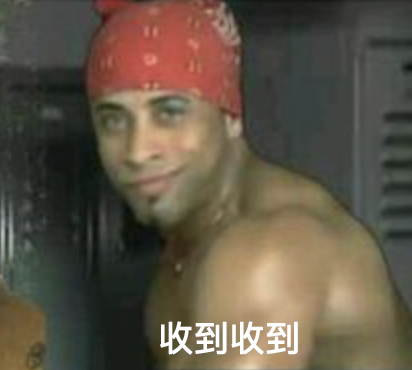
<style>
.page{position:relative;width:412px;height:370px}
.page>*{position:absolute;margin:0}
.t1{font:34.7px "PingFangSC-Regular";color:#ffffff;font-weight:bold}
</style>
<div class="page">
<p class="t1" style="left:160px;top:321px;width:138px;height:34px">收到收到</p>
</div>
